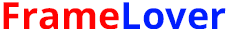
<style>
.page{position:relative;width:227px;height:29px;background:#ffffff}
.page>*{position:absolute;margin:0}
.t1{font:37.6px "OpenSans-Bold";color:#ff0202}
.t2{font:37.6px "OpenSans-Bold";color:#001efe}
</style>
<div class="page">
<p class="t1" style="left:3px;top:2px;width:223px;height:28px">Frame<span class="t2">Lover</span></p>
</div>
